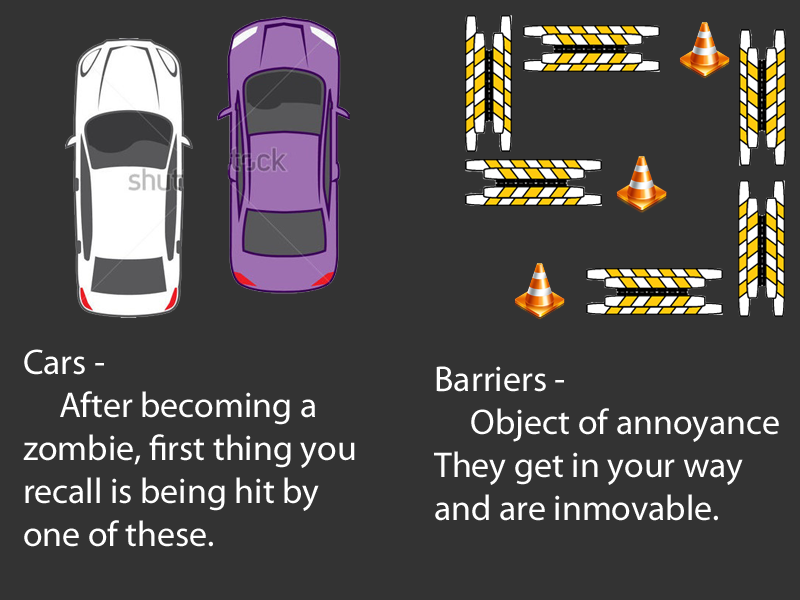
<style>
.page{position:relative;width:800px;height:600px;background:#333333}
.page>*{position:absolute;margin:0}
.t1{font:35.9px "MyriadPro-Regular";color:#ffffff}
</style>
<div class="page">
<p class="t1" style="left:23px;top:349px;width:332px;height:198px">Cars -<br> After becoming a<br>zombie, first thing you<br>recall is being hit by <br>one of these.</p>
<p class="t1" style="left:434px;top:366px;width:345px;height:155px">Barriers -<br> Object of annoyance<br>They get in your way <br>and are inmovable.</p>
</div>
